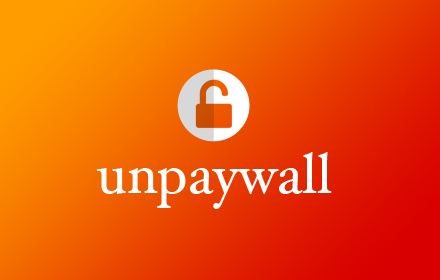
<style>
.page{position:relative;width:440px;height:280px}
.page>*{position:absolute;margin:0}
.t1{font:55.9px "HoeflerText-Regular";color:#ffffff}
</style>
<div class="page">
<p class="t1" style="left:97px;top:152px;width:235px;height:57px">unpaywall</p>
</div>
